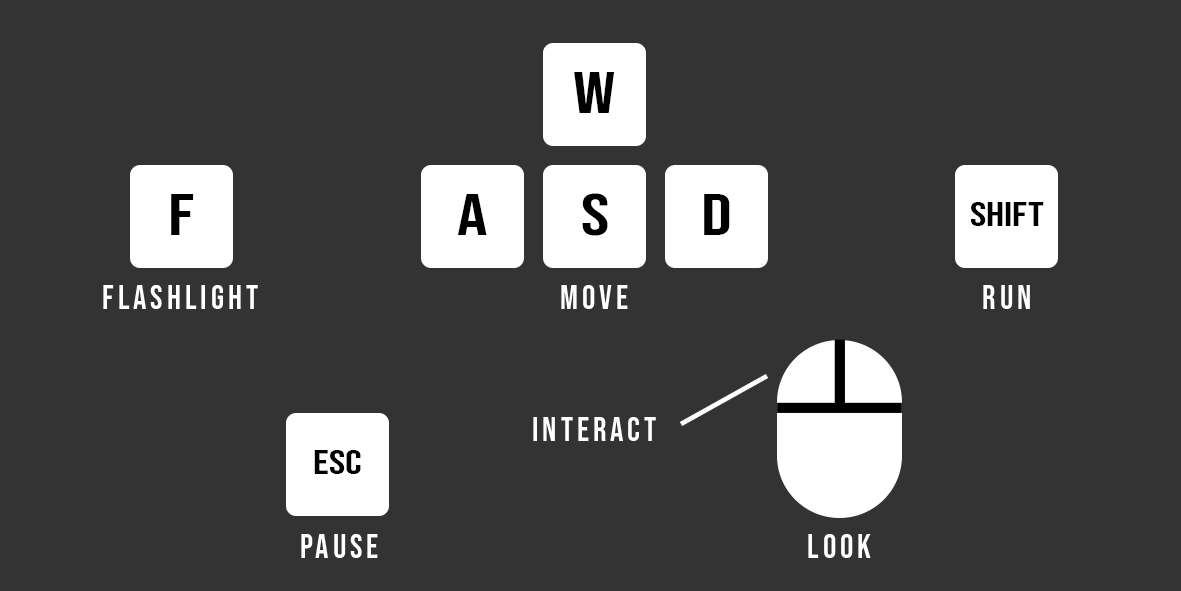
<style>
.page{position:relative;width:1181px;height:591px;background:#333333}
.page>*{position:absolute;margin:0}
.t1{font:58.3px "BebasNeue-Regular";letter-spacing:0.001em;color:#000000;scale:1.3 1}
.t2{font:33.3px "BebasNeue-Regular";letter-spacing:0.001em;color:#000000;scale:1.3 1}
.t3{font:33.3px "BebasNeue-Regular";letter-spacing:0.12em;color:#ffffff}
</style>
<div class="page">
<p class="t1" style="left:574px;top:72px;width:41px;height:41px">W</p>
<p class="t1" style="left:171px;top:194px;width:23px;height:41px">F</p>
<p class="t1" style="left:457px;top:194px;width:30px;height:41px">A</p>
<p class="t1" style="left:582px;top:193px;width:26px;height:43px">S</p>
<p class="t1" style="left:704px;top:194px;width:26px;height:41px">D</p>
<p class="t2" style="left:971px;top:202px;width:73px;height:24px">SHIFT</p>
<p class="t3" style="left:103px;top:285px;width:155px;height:24px">FLASHLIGHT</p>
<p class="t3" style="left:561px;top:285px;width:67px;height:24px">MOVE</p>
<p class="t3" style="left:983px;top:285px;width:47px;height:24px">RUN</p>
<p class="t3" style="left:533px;top:417px;width:123px;height:24px">INTERACT</p>
<p class="t2" style="left:314px;top:450px;width:47px;height:24px">ESC</p>
<p class="t3" style="left:301px;top:534px;width:77px;height:24px">PAUSE</p>
<p class="t3" style="left:808px;top:534px;width:63px;height:24px">LOOK</p>
</div>
